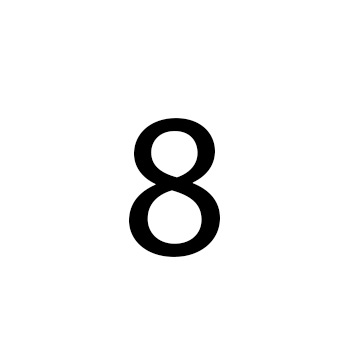
<style>
.page{position:relative;width:354px;height:354px;background:#ffffff}
.page>*{position:absolute;margin:0}
.t1{font:208.3px "MyriadPro-Regular";color:#000000}
</style>
<div class="page">
<p class="t1" style="left:129px;top:118px;width:91px;height:139px">8</p>
</div>
